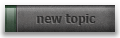
<style>
.page{position:relative;width:120px;height:38px}
.page>*{position:absolute;margin:0}
.t1{font:12px "Tahoma-Bold";color:#313030}
</style>
<div class="page">
<p class="t1" style="left:37px;top:14px;width:59px;height:11px">new topic</p>
</div>
